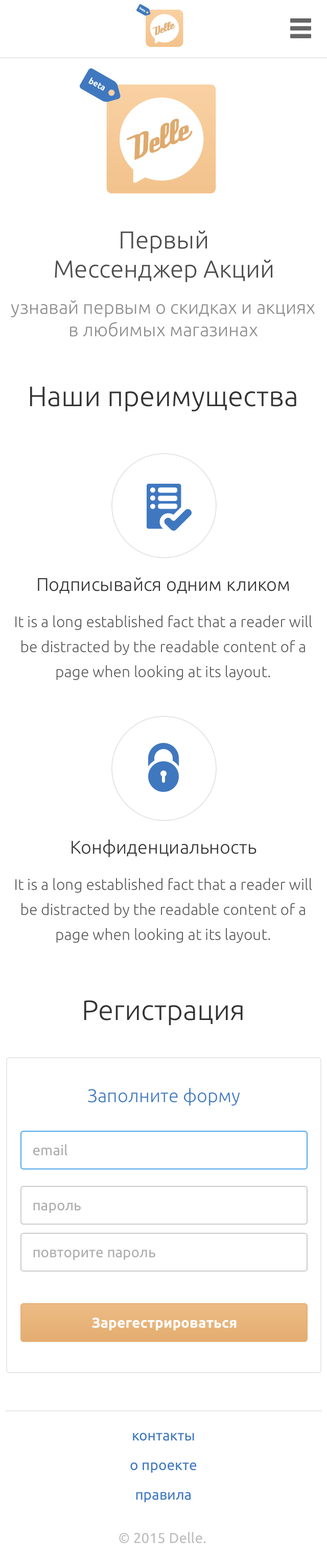
<style>
.page{position:relative;width:327px;height:1568px;background:#ffffff}
.page>*{position:absolute;margin:0}
.t1{font:2.9px "Ubuntu-Bold"}
.t2{font:12.2px "DeftoneStylus";color:#dfaa6d}
.t3{font:8.3px "Ubuntu-Bold";color:#ffffff}
.t4{font:35.5px "DeftoneStylus";color:#dfaa6d}
.t5{font:24.5px "Ubuntu-Light";color:#4d4d4d}
.t6{font:18.4px "Ubuntu-Light";color:#8c8c8c}
.t7{font:28.1px "Ubuntu-Light";color:#333333}
.t8{font:18.4px "Ubuntu-Light";color:#333333}
.t9{font:15.3px/25px "Ubuntu-Light";color:#5a5a5a}
.t10{font:18.4px "Ubuntu-Light";color:#4078c0}
.t11{font:14.3px "Ubuntu";color:#acacac}
.t12{font:14.3px "Ubuntu-Bold";color:#ffffff}
.t13{font:14.3px/29.6px "Ubuntu";color:#4078c0}
.t14{font:14.3px "Ubuntu";color:#bcbcbc}
</style>
<div class="page">
<p class="t1" style="left:139px;top:7px;width:6px;height:5px;rotate:29deg">beta</p>
<p class="t2" style="left:152px;top:21px;width:23px;height:15px;rotate:-22deg">Delle</p>
<p class="t3" style="left:88px;top:78px;width:17px;height:13px;rotate:29deg">beta</p>
<p class="t4" style="left:127px;top:118px;width:65px;height:42px;rotate:-22deg">Delle</p>
<p class="t5" style="left:55px;top:230px;width:217px;height:52px;text-align:center">Первый <br>Мессенджер Акций</p>
<p class="t6" style="left:11px;top:300px;width:303px;height:37px;text-align:center">узнавай первым о скидках и акциях в любимых магазинах</p>
<p class="t7" style="left:30px;top:386px;width:266px;height:26px">Наши преимущества</p>
<p class="t8" style="left:38px;top:577px;width:251px;height:17px">Подписывайся одним кликом</p>
<p class="t9" style="left:15px;top:615px;width:297px;height:65px;text-align:center">It is a long established fact that a reader will be distracted by the readable content of a page when looking at its layout.</p>
<p class="t8" style="left:71px;top:839px;width:185px;height:18px">Конфиденциальность</p>
<p class="t9" style="left:15px;top:878px;width:297px;height:65px;text-align:center">It is a long established fact that a reader will be distracted by the readable content of a page when looking at its layout.</p>
<p class="t7" style="left:84px;top:1000px;width:158px;height:26px">Регистрация</p>
<p class="t10" style="left:88px;top:1088px;width:152px;height:18px">Заполните форму</p>
<p class="t11" style="left:33px;top:1144px;width:34px;height:12px">email</p>
<p class="t11" style="left:33px;top:1203px;width:48px;height:10px">пароль</p>
<p class="t11" style="left:33px;top:1250px;width:122px;height:10px">повторите пароль</p>
<p class="t12" style="left:92px;top:1317px;width:144px;height:14px">Зарегестрироваться</p>
<p class="t13" style="left:130px;top:1433px;width:66px;height:70px;text-align:center">контакты<br>о проекте<br>правила</p>
<p class="t14" style="left:119px;top:1532px;width:87px;height:12px">© 2015 Delle.</p>
</div>
